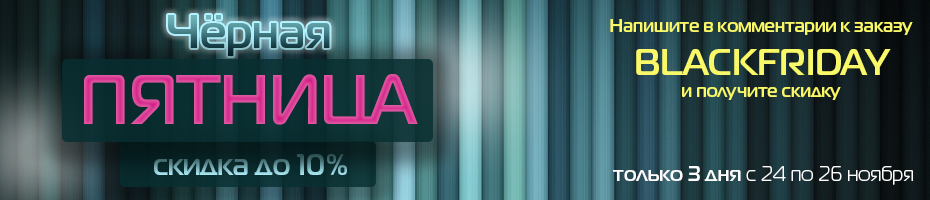
<style>
.page{position:relative;width:930px;height:200px}
.page>*{position:absolute;margin:0}
.t1{font:46.9px "MagistralC-Bold"}
.t2{font:18.1px "MagistralC-Bold";color:#f8f868}
.t3{font:36.2px "MagistralC-Bold";color:#f8f868}
.t4{font:70.3px "MagistralC-Bold";color:#db4499;scale:0.93 1}
.t5{font:29.3px "MagistralC-Bold"}
.t6{font:20.8px "MagistralC";color:#ffffff}
.t7{font:20.8px "MagistralC-Bold";color:#ffffff}
</style>
<div class="page">
<p class="t1" style="left:168px;top:15px;width:162px;height:41px">Чёрная</p>
<p class="t2" style="left:610px;top:19px;width:303px;height:81px;text-align:center">Напишите в комментарии к заказу<br><span class="t3">BLACKFRIDAY<br></span>и получите скидку</p>
<p class="t4" style="left:84px;top:74px;width:334px;height:51px">ПЯТНИЦА</p>
<p class="t5" style="left:154px;top:154px;width:193px;height:21px">скидка до 10%</p>
<p class="t6" style="left:613px;top:166px;width:300px;height:19px"><span class="t7">только 3 дня</span> с 24 по 26 ноября</p>
</div>
